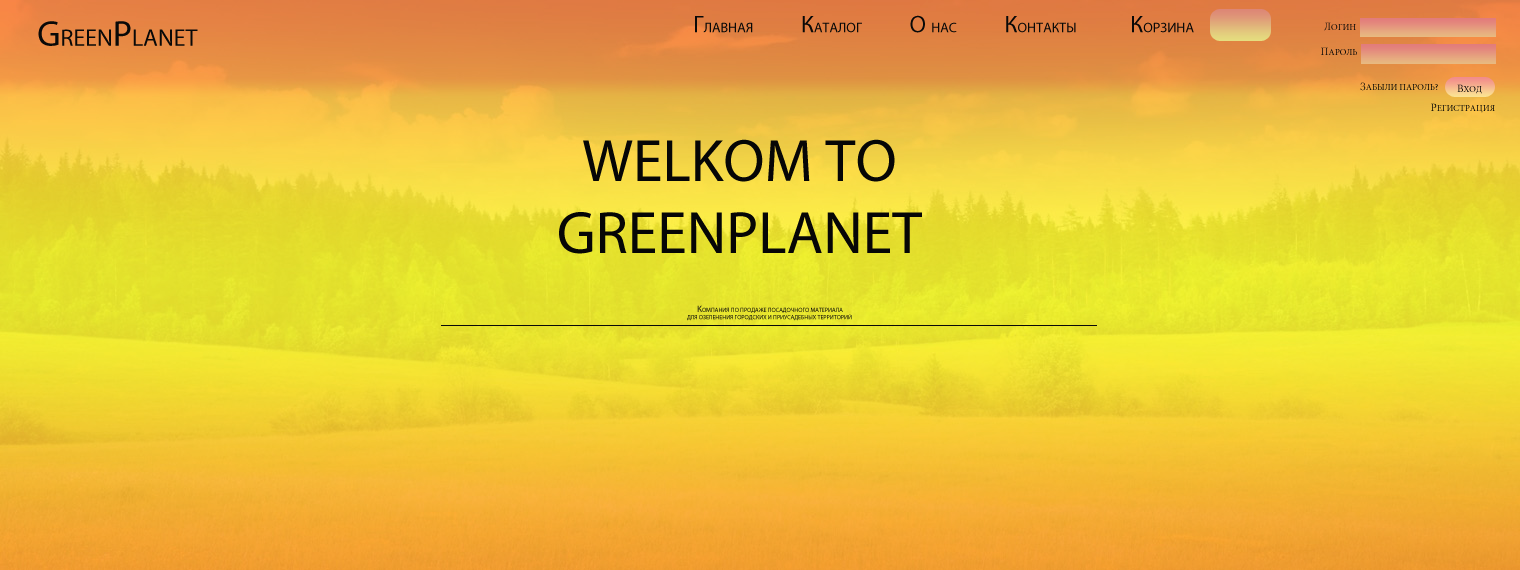
<style>
.page{position:relative;width:1520px;height:570px}
.page>*{position:absolute;margin:0}
.t1{font:14px "MyriadPro-Regular";color:#090908;text-transform:uppercase}
.t2{font:24px "MyriadPro-Regular";color:#090908;text-transform:uppercase}
.t3{font:36px "MyriadPro-Regular";color:#090908;text-transform:uppercase}
.t4{font:9px "MinionPro-Regular";text-transform:uppercase}
.t5{font:11px "MinionPro-Regular";text-transform:uppercase}
.t6{font:60px "MyriadPro-Regular";color:#060606;text-transform:uppercase}
.t7{font:6px "MyriadPro-Regular";color:#090908;text-transform:uppercase}
.t8{font:9px "MyriadPro-Regular";color:#090908;text-transform:uppercase}
</style>
<div class="page">
<p class="t1" style="left:695px;top:15px;width:499px;height:18px"><span class="t2">                                             г</span>лавная                <span class="t2">к</span>аталог                <span class="t2">о </span>нас                <span class="t2">к</span>онтакты                  <span class="t2">к</span>орзина</p>
<p class="t2" style="left:38px;top:21px;width:160px;height:25px"><span class="t3">g</span>reen<span class="t3">p</span>lanet</p>
<p class="t4" style="left:1324px;top:22px;width:32px;height:9px"><span class="t5">          Л</span>ОГИН</p>
<p class="t4" style="left:1321px;top:47px;width:36px;height:8px"><span class="t5">         П</span>АРОЛЬ</p>
<p class="t4" style="left:1360px;top:82px;width:78px;height:9px"><span class="t5">          З</span>АБЫЛИ ПАРОЛЬ?</p>
<p class="t4" style="left:1457px;top:84px;width:25px;height:10px"><span class="t5">                  В</span>ХОД</p>
<p class="t4" style="left:1431px;top:103px;width:64px;height:10px"><span class="t5">         Р</span>ЕГИСТРАЦИЯ</p>
<p class="t6" style="left:559px;top:139px;width:363px;height:115px">WELKOM TO<br>       GreenPlanet</p>
<p class="t7" style="left:687px;top:305px;width:165px;height:16px"><span class="t8">                                                                к</span>омпания по продаже посадочного материала<br>                                                                                        для озеленения городских и приусадебных территорий</p>
</div>
